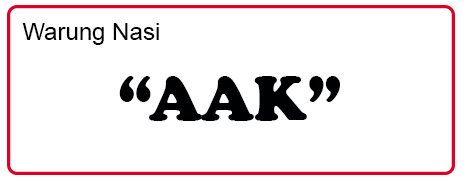
<style>
.page{position:relative;width:466px;height:182px;background:#ffffff}
.page>*{position:absolute;margin:0}
.t1{font:24px "ArialMT";color:#000102}
.t2{font:64px "CooperBlack";color:#000102}
</style>
<div class="page">
<p class="t1" style="left:22px;top:23px;width:137px;height:22px">Warung Nasi</p>
<p class="t2" style="left:119px;top:76px;width:221px;height:45px">“AAK”</p>
</div>
